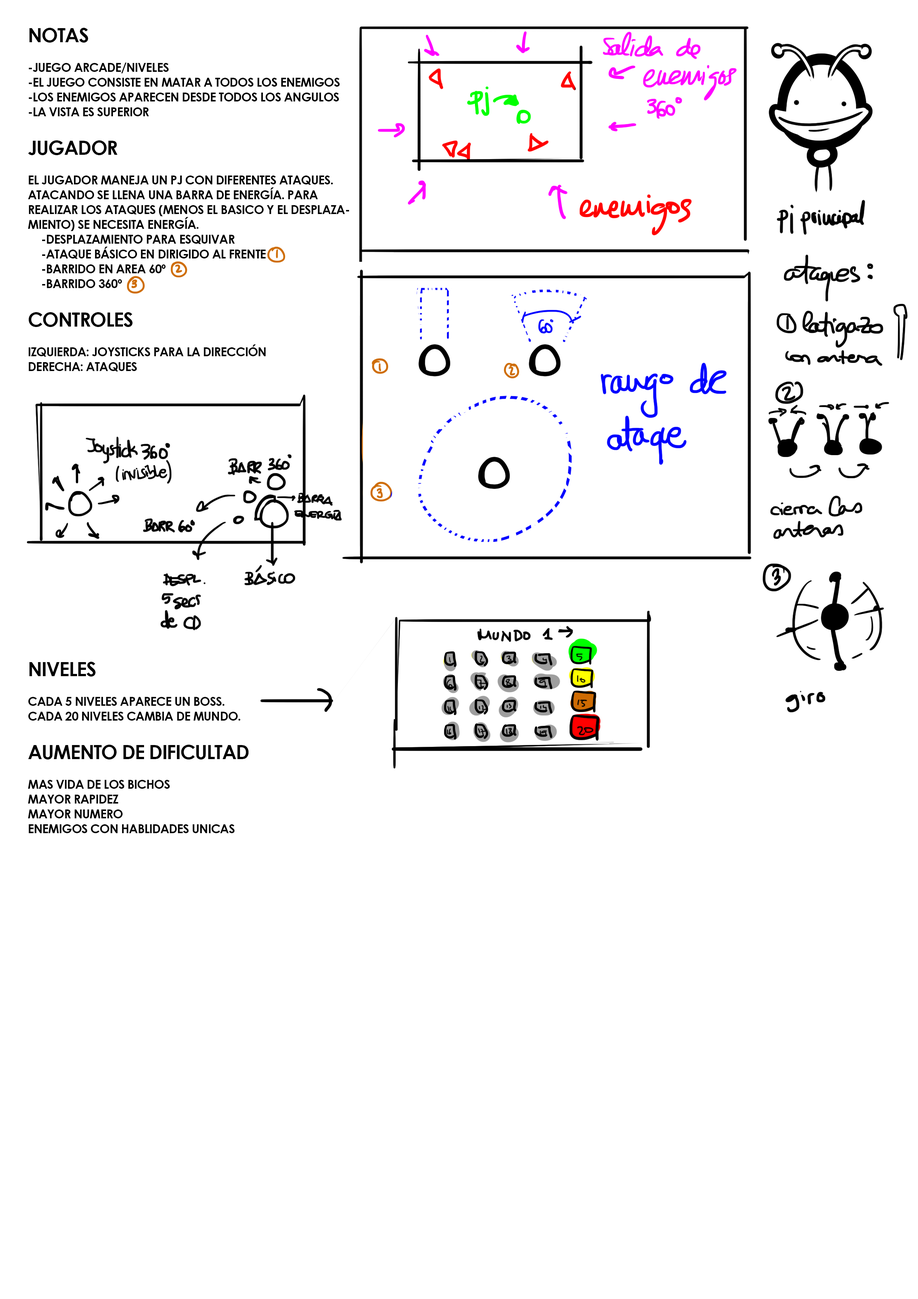
<style>
.page{position:relative;width:918px;height:1299px;background:#ffffff}
.page>*{position:absolute;margin:0}
.t1{font:12.3px "CenturyGothic-Bold";letter-spacing:-0.04em;color:#000000}
.t2{font:19.7px "CenturyGothic-Bold";letter-spacing:-0.04em;color:#000000}
</style>
<div class="page">
<p class="t1" style="left:28px;top:28px;width:321px;height:805px"><span class="t2">NOTAS<br></span><br>-JUEGO ARCADE/NIVELES<br>-EL JUEGO CONSISTE EN MATAR A TODOS LOS ENEMIGOS<br>-LOS ENEMIGOS APARECEN DESDE TODOS LOS ANGULOS<br>-LA VISTA ES SUPERIOR<br><br><span class="t2">JUGADOR<br></span><br>EL JUGADOR MANEJA UN PJ CON DIFERENTES ATAQUES.<br>ATACANDO SE LLENA UNA BARRA DE ENERGÍA. PARA <br>REALIZAR LOS ATAQUES (MENOS EL BASICO Y EL DESPLAZAMIENTO) SE NECESITA ENERGÍA.<br> -DESPLAZAMIENTO PARA ESQUIVAR<br> -ATAQUE BÁSICO EN DIRIGIDO AL FRENTE <br> -BARRIDO EN AREA 60º <br> -BARRIDO 360º<br> <br><span class="t2">CONTROLES<br></span><br>IZQUIERDA: JOYSTICKS PARA LA DIRECCIÓN<br>DERECHA: ATAQUES<br><br><br><br><br><br><br><br><br><br><br><br><br><br><br><br><br><br><br><br><span class="t2">NIVELES<br></span><br>CADA 5 NIVELES APARECE UN BOSS.<br>CADA 20 NIVELES CAMBIA DE MUNDO.<br><br><span class="t2">AUMENTO DE DIFICULTAD<br></span><br>MAS VIDA DE LOS BICHOS<br>MAYOR RAPIDEZ<br>MAYOR NUMERO<br>ENEMIGOS CON HABLIDADES UNICAS</p>
</div>
